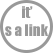
<style>
.page{position:relative;width:54px;height:54px;background:#ffffff}
.page>*{position:absolute;margin:0}
.t1{font:15px "Impact";color:#999999}
</style>
<div class="page">
<p class="t1" style="left:5px;top:6px;width:43px;height:30px">it’s a link</p>
</div>
